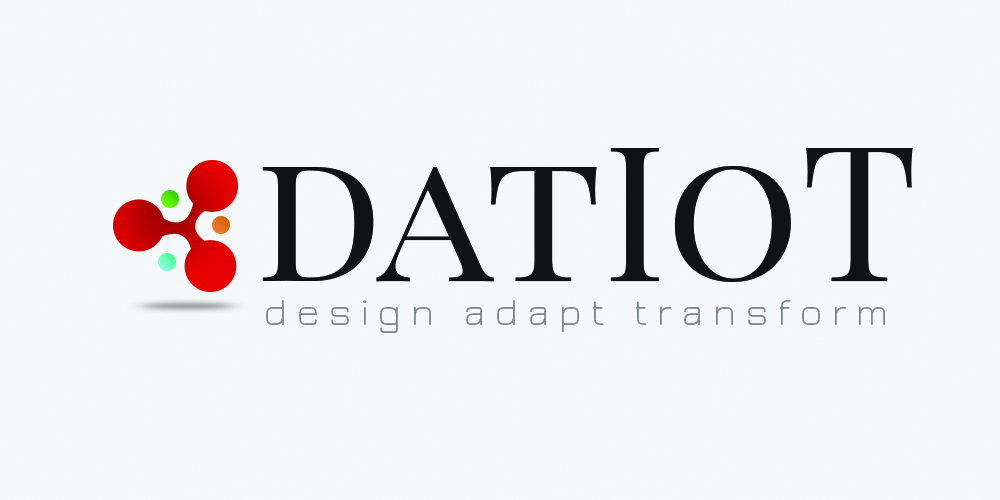
<style>
.page{position:relative;width:1000px;height:500px;background:#f6f9f9}
.page>*{position:absolute;margin:0}
.t1{font:188.5px "PlayfairDisplaySC-Regular";color:#0f1313}
.t2{font:40px "JuraLight";letter-spacing:0.25em;color:#7d8b8d}
</style>
<div class="page">
<p class="t1" style="left:262px;top:148px;width:651px;height:134px">datIoT</p>
<p class="t2" style="left:266px;top:300px;width:619px;height:33px">design adapt transform</p>
</div>
